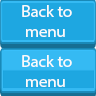
<style>
.page{position:relative;width:96px;height:96px;background:#1ea7e1}
.page>*{position:absolute;margin:0}
.t1{font:16.7px "MyriadPro-Regular";color:#fafafa}
</style>
<div class="page">
<p class="t1" style="left:22px;top:5px;width:50px;height:32px">Back to <br> menu</p>
<p class="t1" style="left:22px;top:55px;width:50px;height:32px">Back to <br> menu</p>
</div>
